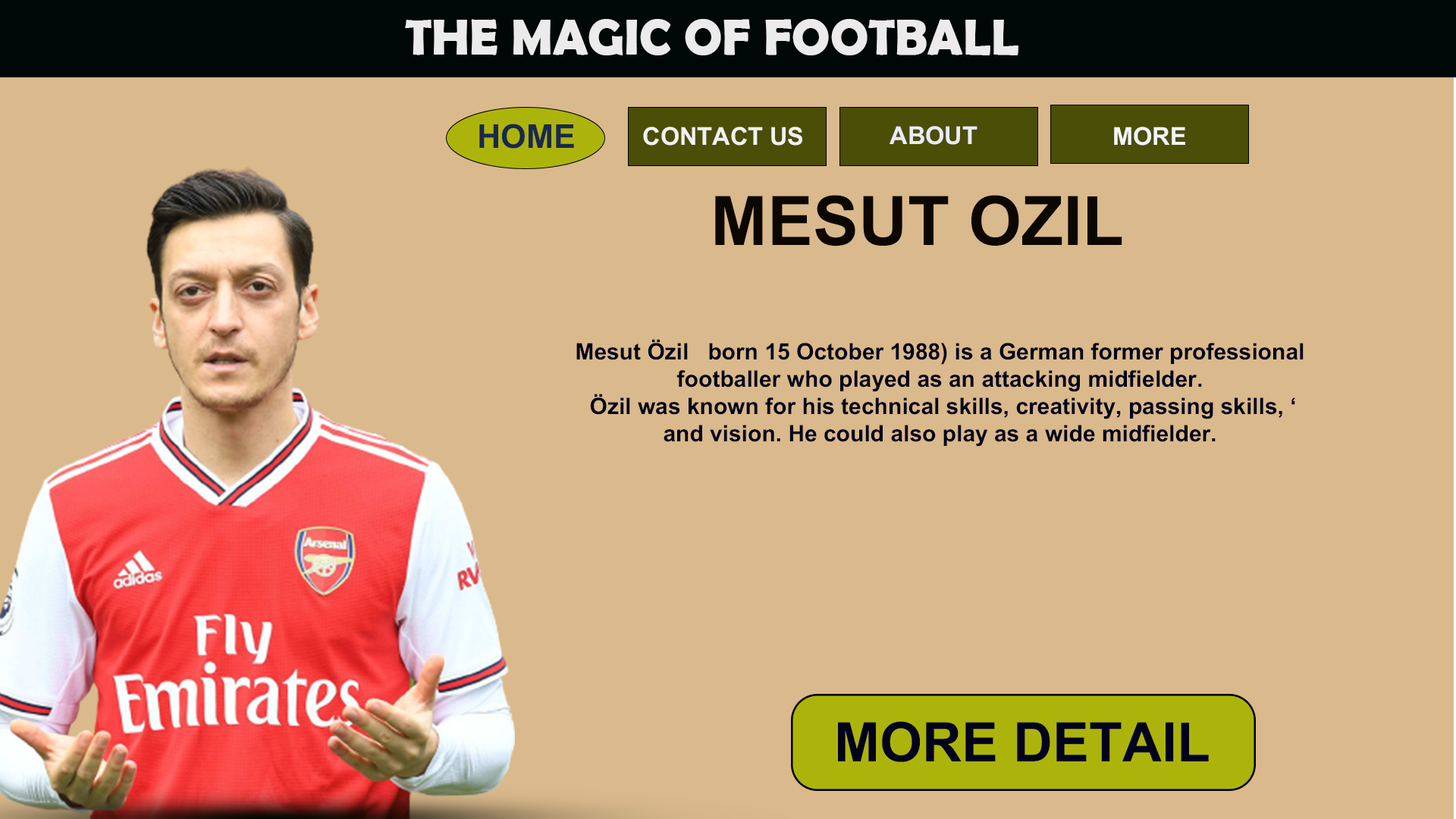
<style>
.page{position:relative;width:1456px;height:819px;background:#dab98c}
.page>*{position:absolute;margin:0}
.t1{font:50.9px "BerlinSansFBDemi-Bold";color:#ebebec}
.t2{font:32.8px "AKbalthomSeoul";color:#1a284d}
.t3{font:24.6px "AKbalthomSeoul";color:#eaebf6}
.t4{font:24.6px "AKbalthomSeoul";color:#f1f1f1}
.t5{font:24.6px "AKbalthomSeoul";color:#f4f4f7}
.t6{font:68.2px "AKbalthomSeoul";color:#0c0701}
.t7{font:22.7px "AKbalthomSeoul";color:#02031b}
.t8{font:54.6px "AKbalthomSeoul";color:#02031b}
</style>
<div class="page">
<p class="t1" style="left:405px;top:19px;width:613px;height:36px">THE MAGIC OF FOOTBALL</p>
<p class="t2" style="left:479px;top:124px;width:95px;height:25px">HOME</p>
<p class="t3" style="left:890px;top:126px;width:87px;height:19px">ABOUT</p>
<p class="t4" style="left:643px;top:127px;width:159px;height:19px">CONTACT US</p>
<p class="t5" style="left:1114px;top:127px;width:71px;height:19px">MORE</p>
<p class="t6" style="left:715px;top:195px;width:407px;height:51px">MESUT OZIL</p>
<p class="t7" style="left:576px;top:339px;width:728px;height:108px;text-align:center">Mesut Özil   born 15 October 1988) is a German former professional <br>footballer who played as an attacking midfielder.<br> Özil was known for his technical skills, creativity, passing skills, ‘<br>and vision. He could also play as a wide midfielder.</p>
<p class="t8" style="left:838px;top:721px;width:371px;height:41px">MORE DETAIL</p>
</div>
